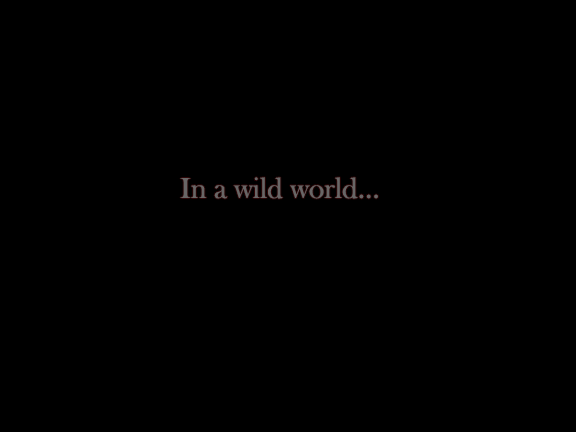
<style>
.page{position:relative;width:576px;height:432px;background:#000000}
.page>*{position:absolute;margin:0}
.t1{font:30px "BaskOldFace";color:#686666}
</style>
<div class="page">
<p class="t1" style="left:180px;top:177px;width:198px;height:22px">In a wild world...</p>
</div>
